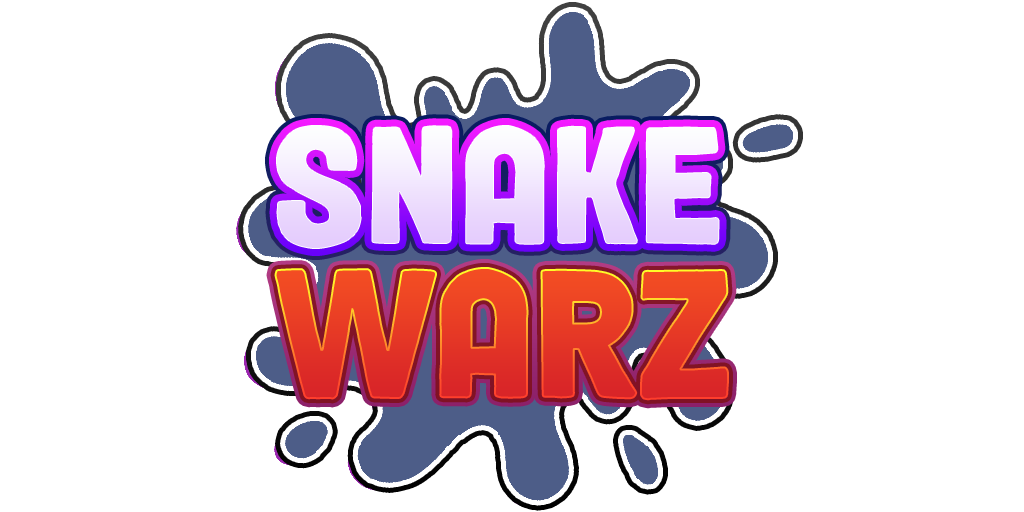
<style>
.page{position:relative;width:1024px;height:512px;background:#ffffff}
.page>*{position:absolute;margin:0}
.t1{font:166.8px "Mortina-DEMO-Regular";color:#f1e5fe}
.t2{font:181.4px "Mortina-DEMO-Regular";color:#e63925}
</style>
<div class="page">
<p class="t1" style="left:277px;top:126px;width:442px;height:122px">SNAKE</p>
<p class="t2" style="left:276px;top:269px;width:451px;height:130px">WARZ</p>
</div>
